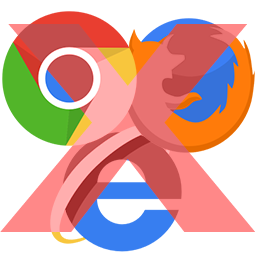
<style>
.page{position:relative;width:256px;height:256px;background:#ffffff}
.page>*{position:absolute;margin:0}
.t1{font:288.2px "TradeGothic-Bold";letter-spacing:-0.04em;scale:1.64 1}
</style>
<div class="page">
<p class="t1" style="left:0px;top:24px;width:255px;height:208px">X</p>
</div>
